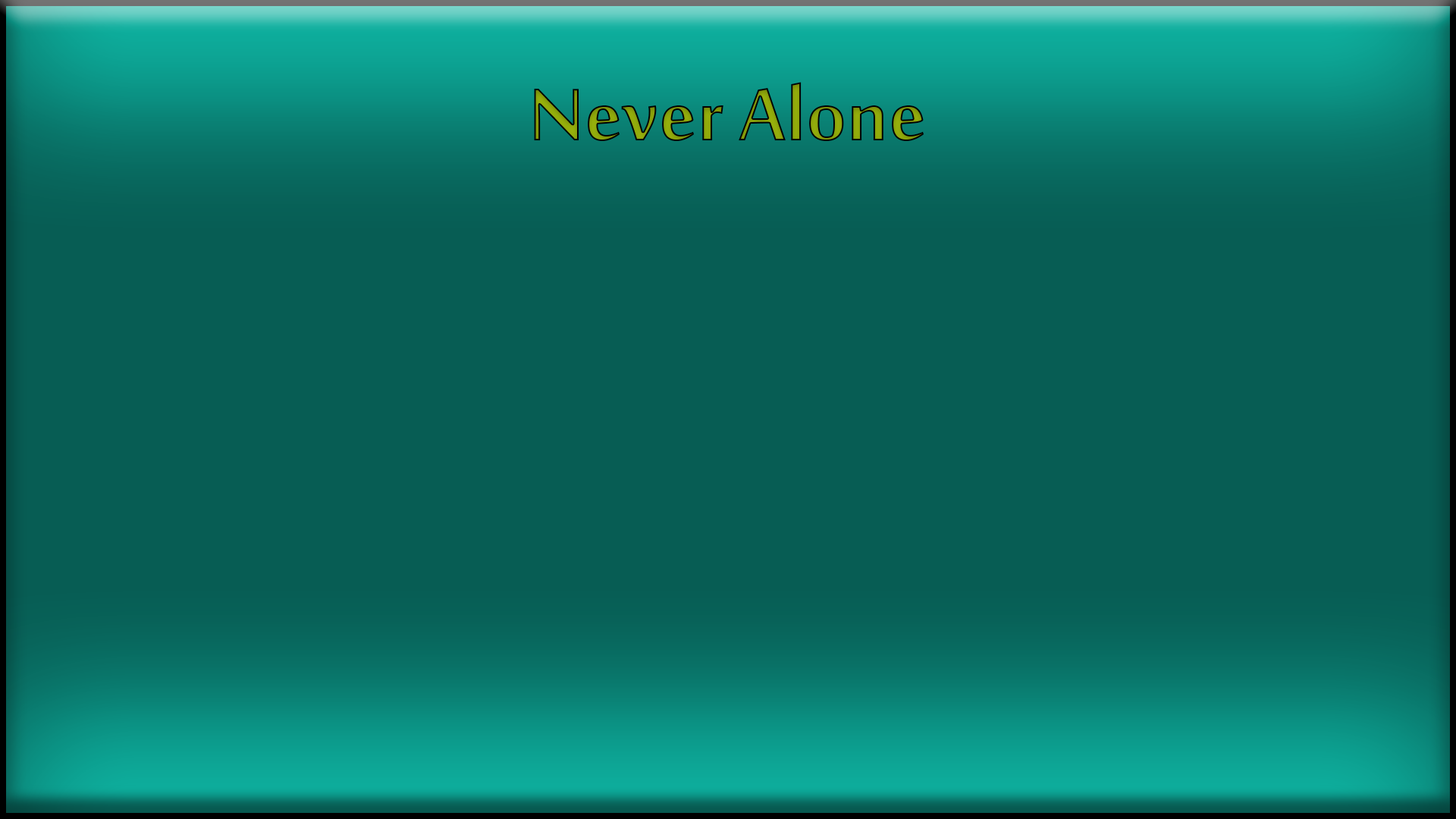
<style>
.page{position:relative;width:1456px;height:819px;background:#075d54}
.page>*{position:absolute;margin:0}
.t1{font:113.7px "MoolBoran"}
</style>
<div class="page">
<p class="t1" style="left:534px;top:82px;width:390px;height:59px">Never Alone</p>
</div>
